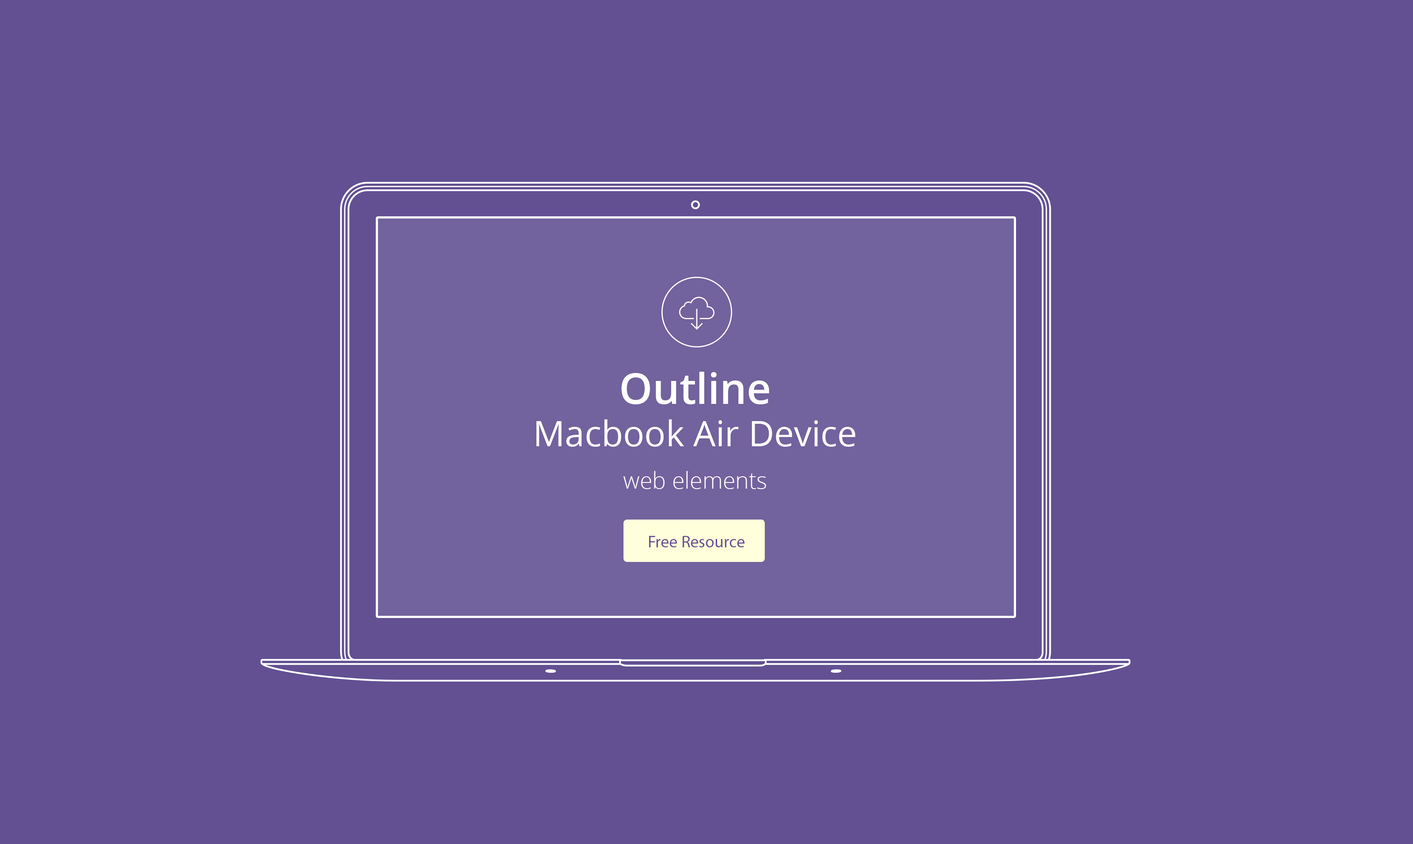
<style>
.page{position:relative;width:1413px;height:844px;background:#625092}
.page>*{position:absolute;margin:0}
.t1{font:35.3px/42.4px "OpenSans";color:#ffffff}
.t2{font:42.4px "OpenSans-Semibold";color:#ffffff}
.t3{font:23px/42.4px "OpenSans-Light";color:#ffffff}
.t4{font:16.8px "MyriadPro-Regular";color:#635093}
</style>
<div class="page">
<p class="t1" style="left:536px;top:372px;width:319px;height:117px;text-align:center"><span class="t2">Outline <br></span>Macbook Air Device<br><span class="t3">web elements</span></p>
<p class="t4" style="left:649px;top:536px;width:95px;height:11px">Free Resource</p>
</div>
